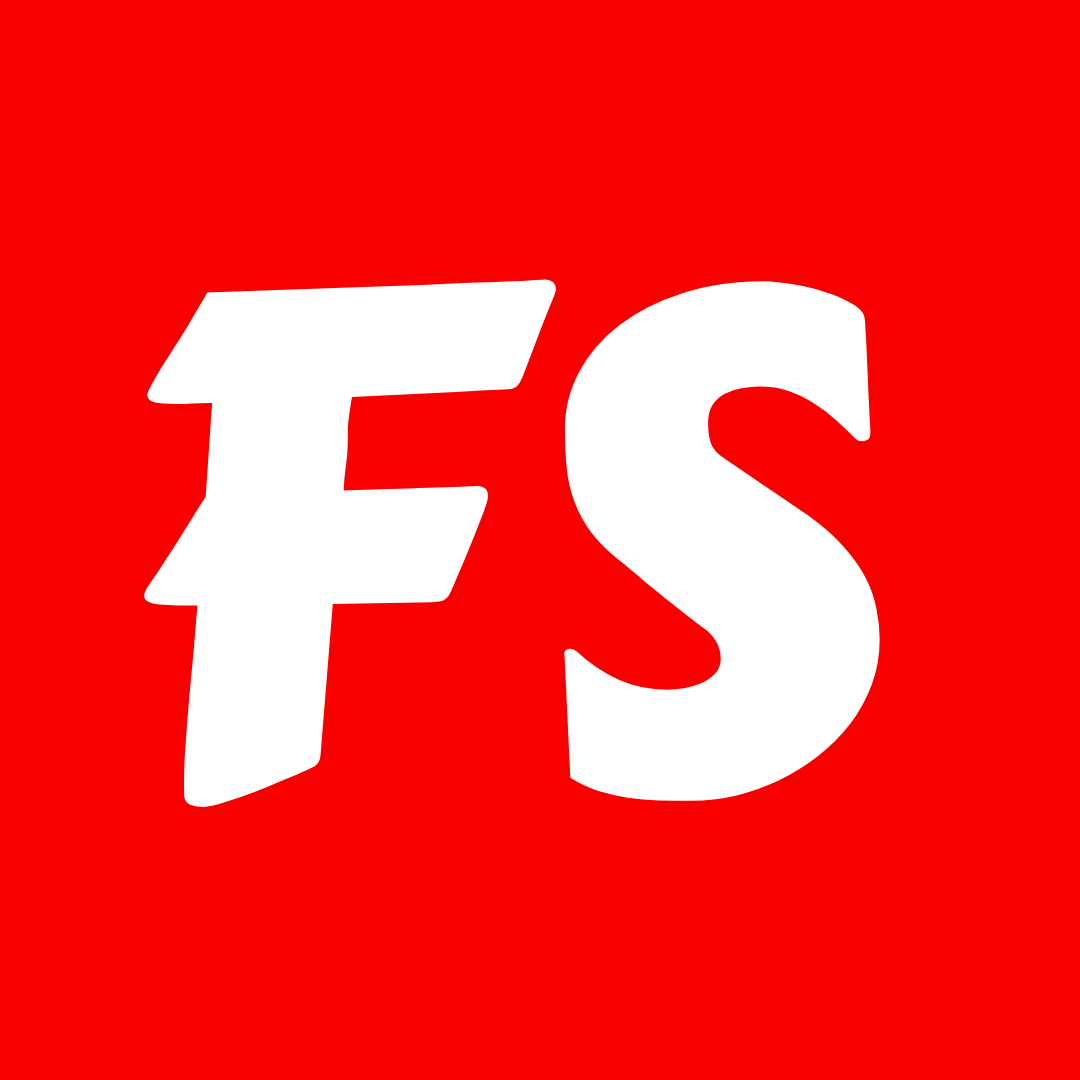
<style>
.page{position:relative;width:1080px;height:1080px;background:#f80000}
.page>*{position:absolute;margin:0}
.t1{font:700px "CarterOne";color:#ffffff}
</style>
<div class="page">
<p class="t1" style="left:144px;top:279px;width:736px;height:528px">FS</p>
</div>
